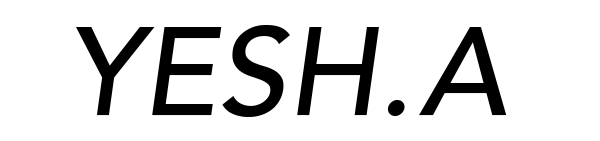
<style>
.page{position:relative;width:600px;height:141px;background:#ffffff}
.page>*{position:absolute;margin:0}
.t1{font:124.3px "Avenir-MediumOblique";color:#000000;text-transform:uppercase}
.t2{font:124.3px "Avenir-MediumOblique";letter-spacing:0.05em;color:#000000;text-transform:uppercase}
</style>
<div class="page">
<p class="t1" style="left:76px;top:25px;width:431px;height:92px">yesh<span class="t2">.a</span></p>
</div>
